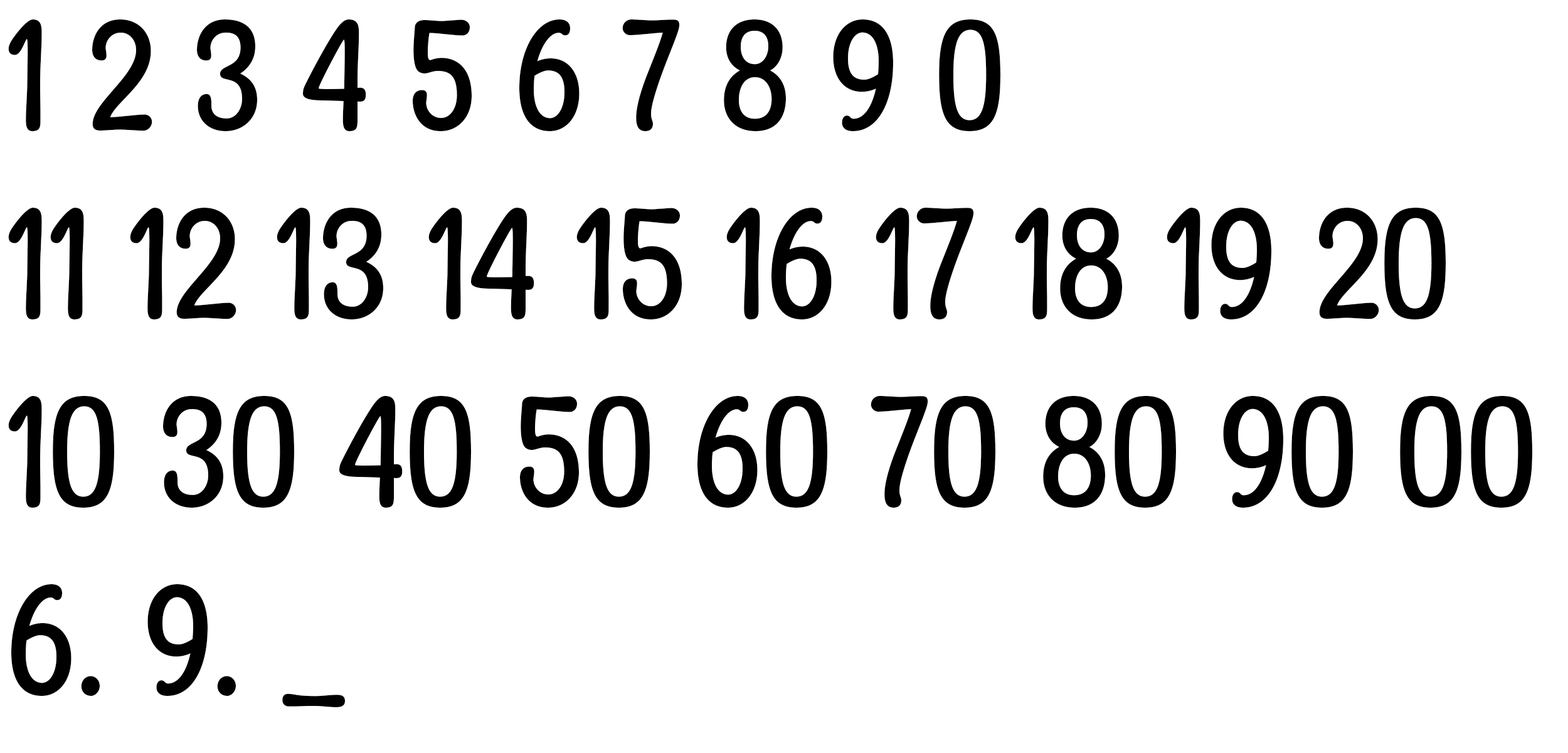
<style>
.page{position:relative;width:1568px;height:753px;background:#ffffff}
.page>*{position:absolute;margin:0}
.t1{font:156.8px "Mangabey-Regular";color:#000000}
</style>
<div class="page">
<p class="t1" style="left:8px;top:19px;width:1524px;height:688px">1 2 3 4 5 6 7 8 9 0 <br>11 12 13 14 15 16 17 18 19 20<br>10 30 40 50 60 70 80 90 00<br>6. 9. _</p>
</div>
